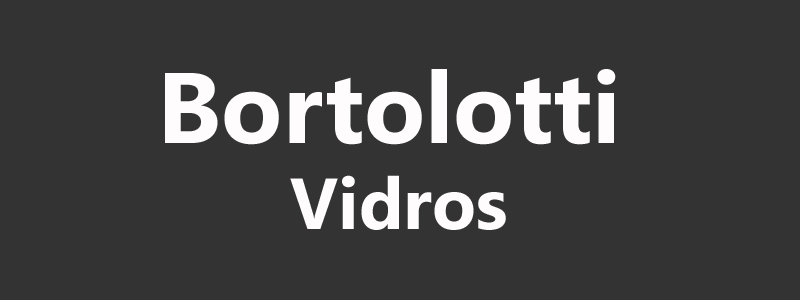
<style>
.page{position:relative;width:800px;height:300px;background:#333333}
.page>*{position:absolute;margin:0}
.t1{font:100px "SegoeUI-Bold";color:#fefcfc}
.t2{font:72px "SegoeUI-Bold";color:#fefcfc}
</style>
<div class="page">
<p class="t1" style="left:165px;top:69px;width:451px;height:161px;text-align:center">Bortolotti<br> <span class="t2">Vidros</span></p>
</div>
